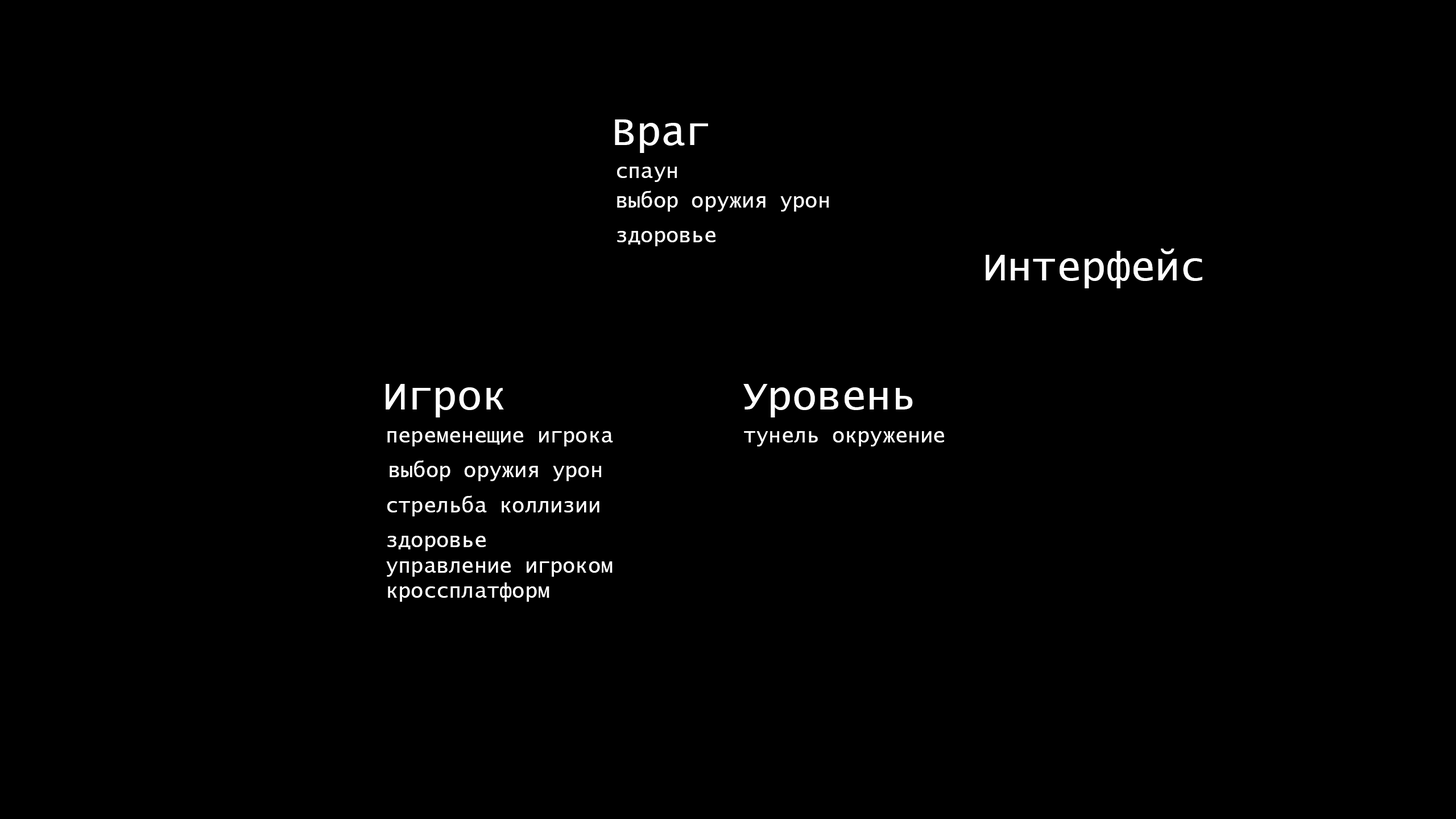
<style>
.page{position:relative;width:1456px;height:819px;background:#000000}
.page>*{position:absolute;margin:0}
.t1{font:40.9px "LucidaConsole";color:#ffffff}
.t2{font:21px "LucidaConsole";color:#ffffff}
</style>
<div class="page">
<p class="t1" style="left:615px;top:119px;width:93px;height:34px">Враг</p>
<p class="t2" style="left:617px;top:167px;width:60px;height:15px">спаун</p>
<p class="t2" style="left:617px;top:191px;width:212px;height:21px">выбор оружия урон</p>
<p class="t2" style="left:617px;top:231px;width:98px;height:15px">здоровье</p>
<p class="t1" style="left:986px;top:249px;width:216px;height:39px">Интерфейс</p>
<p class="t1" style="left:386px;top:384px;width:118px;height:33px">Игрок</p>
<p class="t1" style="left:743px;top:384px;width:170px;height:33px">Уровень</p>
<p class="t2" style="left:387px;top:431px;width:226px;height:15px">переменещие игрока</p>
<p class="t2" style="left:744px;top:431px;width:200px;height:15px">тунель окружение</p>
<p class="t2" style="left:390px;top:460px;width:211px;height:21px">выбор оружия урон</p>
<p class="t2" style="left:387px;top:495px;width:212px;height:21px">стрельба коллизии</p>
<p class="t2" style="left:386px;top:536px;width:227px;height:66px">здоровье<br>управление игроком <br>кроссплатформ</p>
</div>
